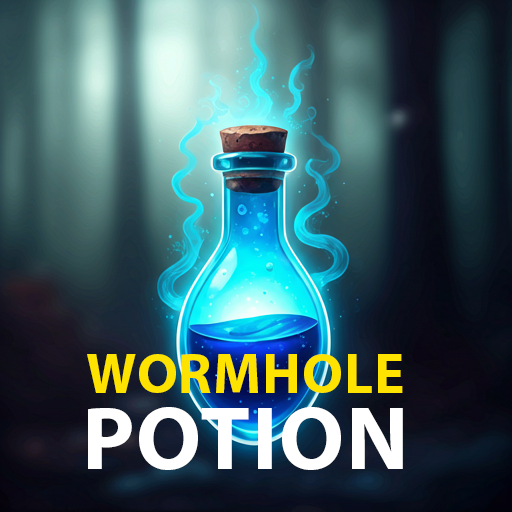
<style>
.page{position:relative;width:512px;height:512px}
.page>*{position:absolute;margin:0}
.t1{font:56.5px "MyriadPro-Bold";color:#fee300;text-transform:uppercase}
.t2{font:90.5px "MyriadPro-Bold";color:#ffffff;text-transform:uppercase}
</style>
<div class="page">
<p class="t1" style="left:87px;top:354px;width:316px;height:39px">Wormhole</p>
<p class="t2" style="left:88px;top:407px;width:315px;height:63px">Potion</p>
</div>
